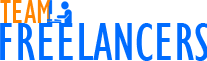
<style>
.page{position:relative;width:207px;height:61px;background:#ffffff}
.page>*{position:absolute;margin:0}
.t1{font:35px "GillSansMT-Condensed";color:#ff8400}
.t2{font:55.1px "GillSansMT-Condensed";color:#006cff;text-transform:uppercase}
</style>
<div class="page">
<p class="t1" style="left:0px;top:0px;width:51px;height:23px">TEAM</p>
<p class="t2" style="left:0px;top:23px;width:208px;height:38px">freelancers</p>
</div>
